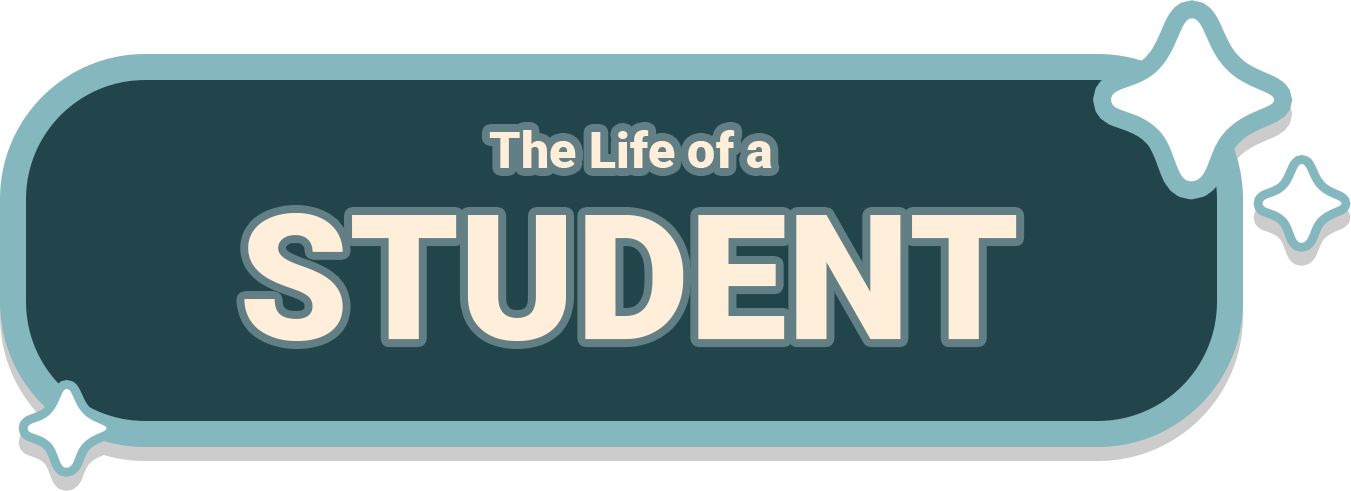
<style>
.page{position:relative;width:1351px;height:491px;background:#22454c}
.page>*{position:absolute;margin:0}
.t1{font:50px "Roboto-Black";color:#ffeed9}
.t2{font:175px "Roboto-Black";color:#ffeed9}
</style>
<div class="page">
<p class="t1" style="left:489px;top:130px;width:283px;height:38px">The Life of a</p>
<p class="t2" style="left:244px;top:213px;width:773px;height:128px">STUDENT</p>
</div>
